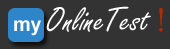
<style>
.page{position:relative;width:170px;height:49px;background:#333333}
.page>*{position:absolute;margin:0}
.t1{font:36px "FreestyleScript-Regular";color:#ffffff}
.t2{font:20px "Arial-BoldMT";color:#ffffff}
.t3{font:36px "Garamond";color:#b12c03}
</style>
<div class="page">
<p class="t1" style="left:14px;top:6px;width:149px;height:30px"><span class="t2">my </span>OnlineTest <span class="t3">!</span></p>
</div>
